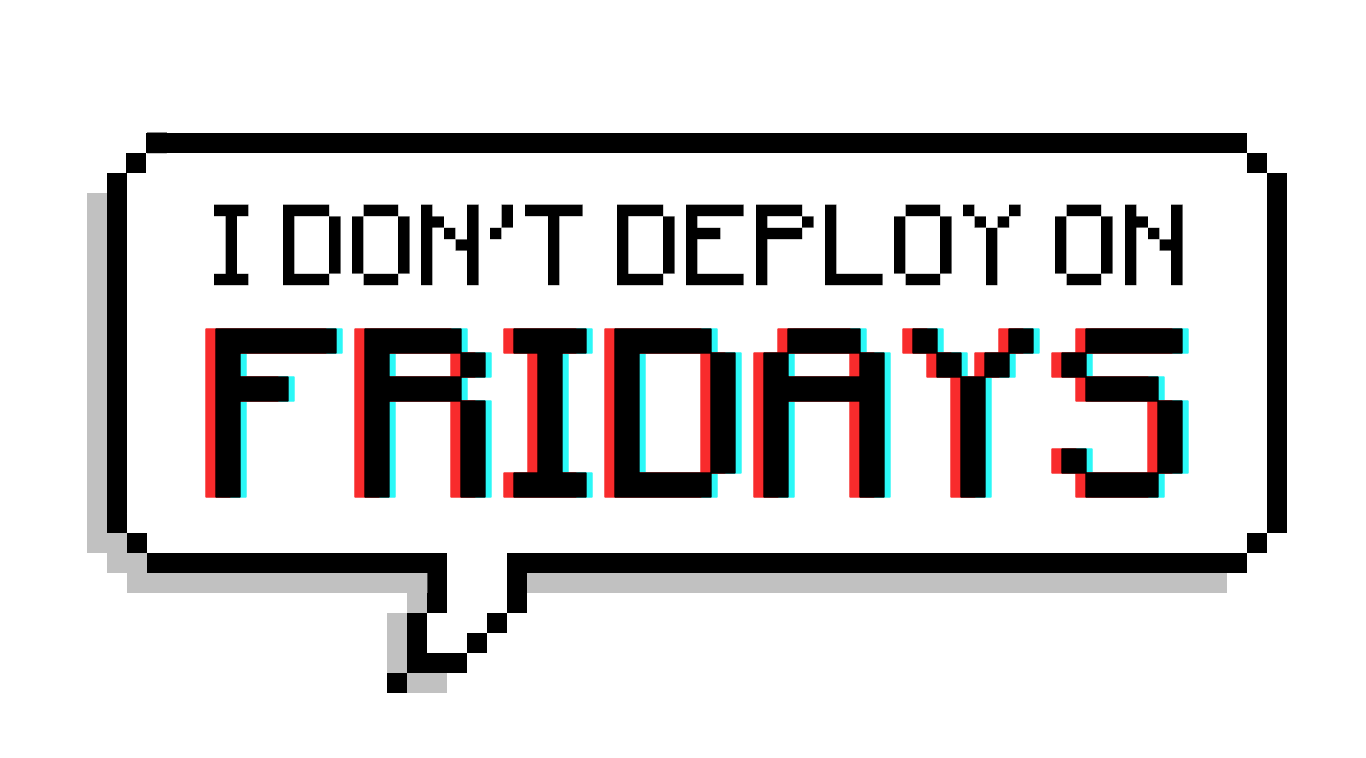
<style>
.page{position:relative;width:1366px;height:758px;background:#ffffff}
.page>*{position:absolute;margin:0}
.t1{font:92.2px "Minecraftia-Regular";color:#000000}
.t2{font:191.6px "Minecraftia-Regular";color:#000000;font-weight:bold}
</style>
<div class="page">
<p class="t1" style="left:214px;top:204px;width:969px;height:82px">I DON’T DEPLOY ON</p>
<p class="t2" style="left:205px;top:328px;width:968px;height:170px">FRIDAYS</p>
<p class="t2" style="left:215px;top:328px;width:968px;height:170px">FRIDAYS</p>
<p class="t2" style="left:221px;top:328px;width:968px;height:170px">FRIDAYS</p>
</div>
